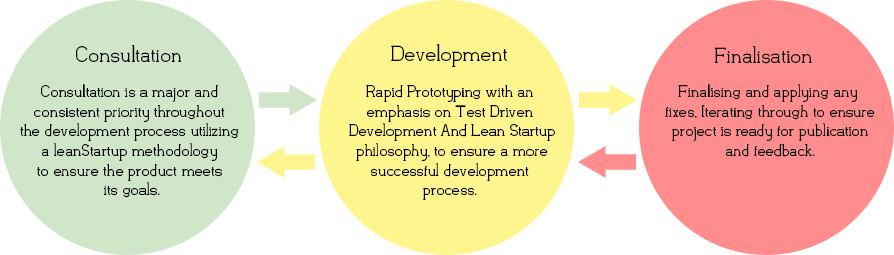
<style>
.page{position:relative;width:894px;height:255px;background:#ffffff}
.page>*{position:absolute;margin:0}
.t1{font:21.8px "Flatform-Light";color:#000000}
.t2{font:16.4px "Flatform-Light";color:#000000}
</style>
<div class="page">
<p class="t1" style="left:76px;top:45px;width:106px;height:18px">Consultation</p>
<p class="t1" style="left:391px;top:44px;width:116px;height:23px">Development</p>
<p class="t1" style="left:714px;top:46px;width:98px;height:18px">Finalisation</p>
<p class="t2" style="left:20px;top:84px;width:219px;height:114px;text-align:center">Consultation is a major and <br>consistent priority throughout <br>the development process utilizing <br>a leanStartup methodology <br>to ensure the product meets <br>its goals.</p>
<p class="t2" style="left:349px;top:85px;width:206px;height:115px;text-align:center">Rapid Prototyping with an <br>emphasis on Test Driven <br>Development And Lean Startup<br> philosophy, to ensure a more <br>successful development <br>process.</p>
<p class="t2" style="left:665px;top:84px;width:210px;height:73px;text-align:center">Finalising and applying any <br>fixes, Iterating through to ensure<br>project is ready for publication<br>and feedback.</p>
</div>
